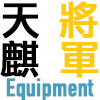
<style>
.page{position:relative;width:100px;height:100px;background:#ffffff}
.page>*{position:absolute;margin:0}
.t1{font:39.8px "LiGothicMed";color:#000000;font-weight:bold}
.t2{font:9.6px/204px "LiGothicMed";color:#ffca0b;font-weight:bold}
.t3{font:9.6px/204px "LiGothicMed";color:#000000;font-weight:bold}
.t4{font:25px "DINCondensed-Bold";color:#479eba;font-weight:bold}
</style>
<div class="page">
<p class="t1" style="left:2px;top:3px;width:37px;height:36px">天</p>
<p class="t2" style="left:59px;top:1px;width:39px;height:38px">將</p>
<p class="t3" style="left:0px;top:40px;width:39px;height:38px">麒</p>
<p class="t2" style="left:60px;top:42px;width:39px;height:36px">軍</p>
<p class="t4" style="left:6px;top:78px;width:88px;height:24px">Equipment</p>
</div>
